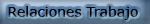
<style>
.page{position:relative;width:150px;height:24px}
.page>*{position:absolute;margin:0}
.t1{font:14px "Verdana";color:#000000}
</style>
<div class="page">
<p class="t1" style="left:8px;top:6px;width:130px;height:14px">Relaciones Trabajo</p>
</div>
